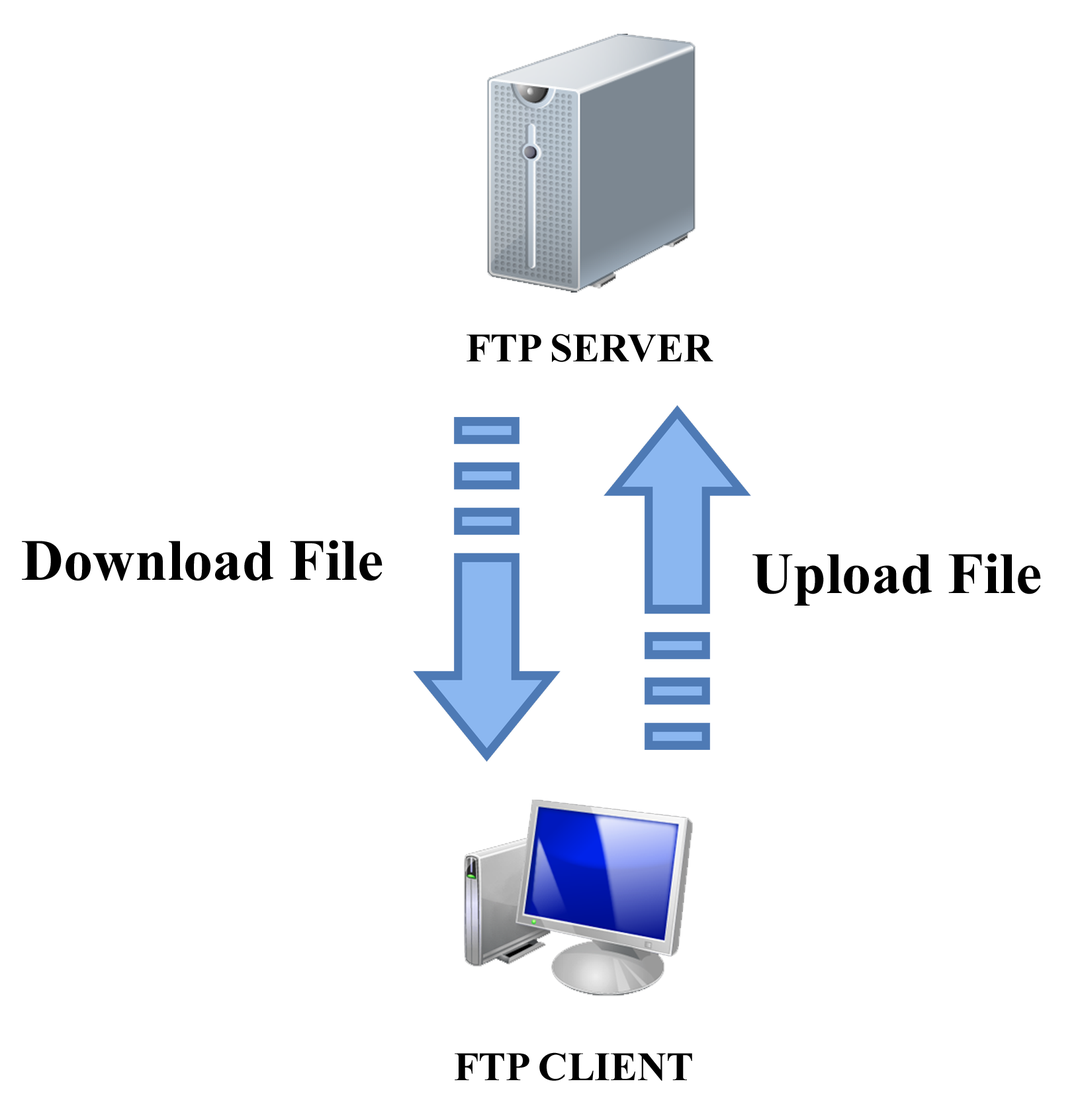
<style>
.page{position:relative;width:1080px;height:1104px;background:#ffffff}
.page>*{position:absolute;margin:0}
.t1{font:40.5px "TimesNewRomanPS-BoldMT";color:#000000}
.t2{font:58.4px "TimesNewRomanPS-BoldMT";color:#000000}
</style>
<div class="page">
<p class="t1" style="left:467px;top:334px;width:246px;height:28px">FTP SERVER</p>
<p class="t2" style="left:22px;top:540px;width:361px;height:41px">Download File</p>
<p class="t2" style="left:753px;top:553px;width:288px;height:53px">Upload File</p>
<p class="t1" style="left:455px;top:1052px;width:237px;height:29px">FTP CLIENT</p>
</div>
